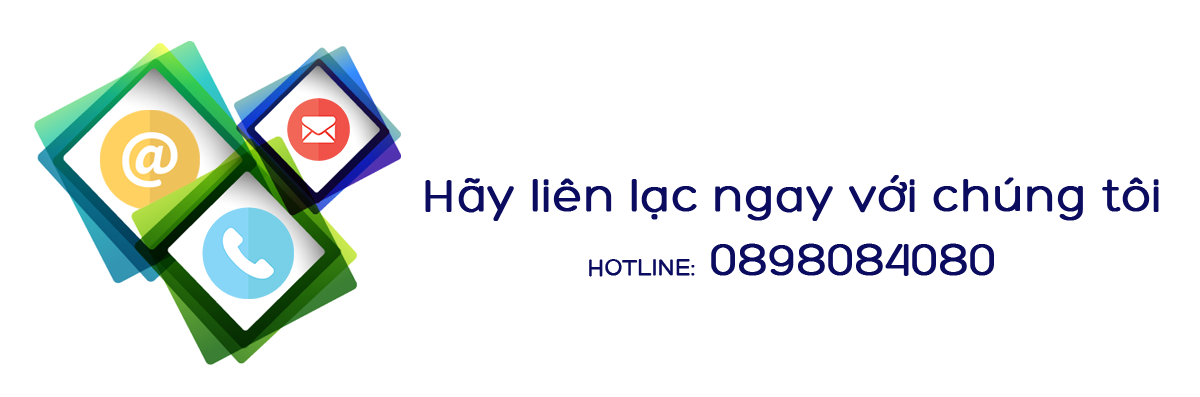
<style>
.page{position:relative;width:1200px;height:397px;background:#ffffff}
.page>*{position:absolute;margin:0}
.t1{font:48px "SP3---Hero";color:#0b0c60;font-weight:bold}
.t2{font:24px "SP3---Hero";color:#0b0c60;font-weight:bold}
</style>
<div class="page">
<p class="t1" style="left:425px;top:175px;width:734px;height:46px">Hãy liên lạc ngay với chúng tôi</p>
<p class="t1" style="left:589px;top:243px;width:405px;height:34px"><span class="t2">HOTLINE:</span> 0898084080</p>
</div>
